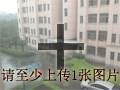
<style>
.page{position:relative;width:120px;height:90px}
.page>*{position:absolute;margin:0}
.t1{font:14px "SimSun";color:#270303}
</style>
<div class="page">
<p class="t1" style="left:1px;top:68px;width:118px;height:14px">请至少上传1张图片</p>
</div>
